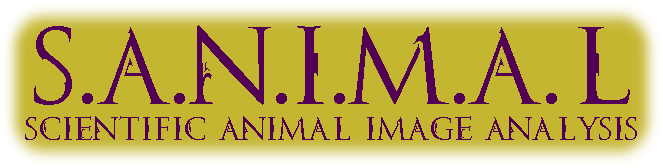
<style>
.page{position:relative;width:663px;height:168px;background:#c5b632}
.page>*{position:absolute;margin:0}
.t1{font:100px "SWTORTrajan";color:#510054}
.t2{font:30px "SWTORTrajan";color:#510054}
</style>
<div class="page">
<p class="t1" style="left:34px;top:25px;width:596px;height:80px">S.A.N.I.M.A.L</p>
<p class="t2" style="left:25px;top:116px;width:612px;height:24px">Scientific Animal Image AnaLysis</p>
</div>
